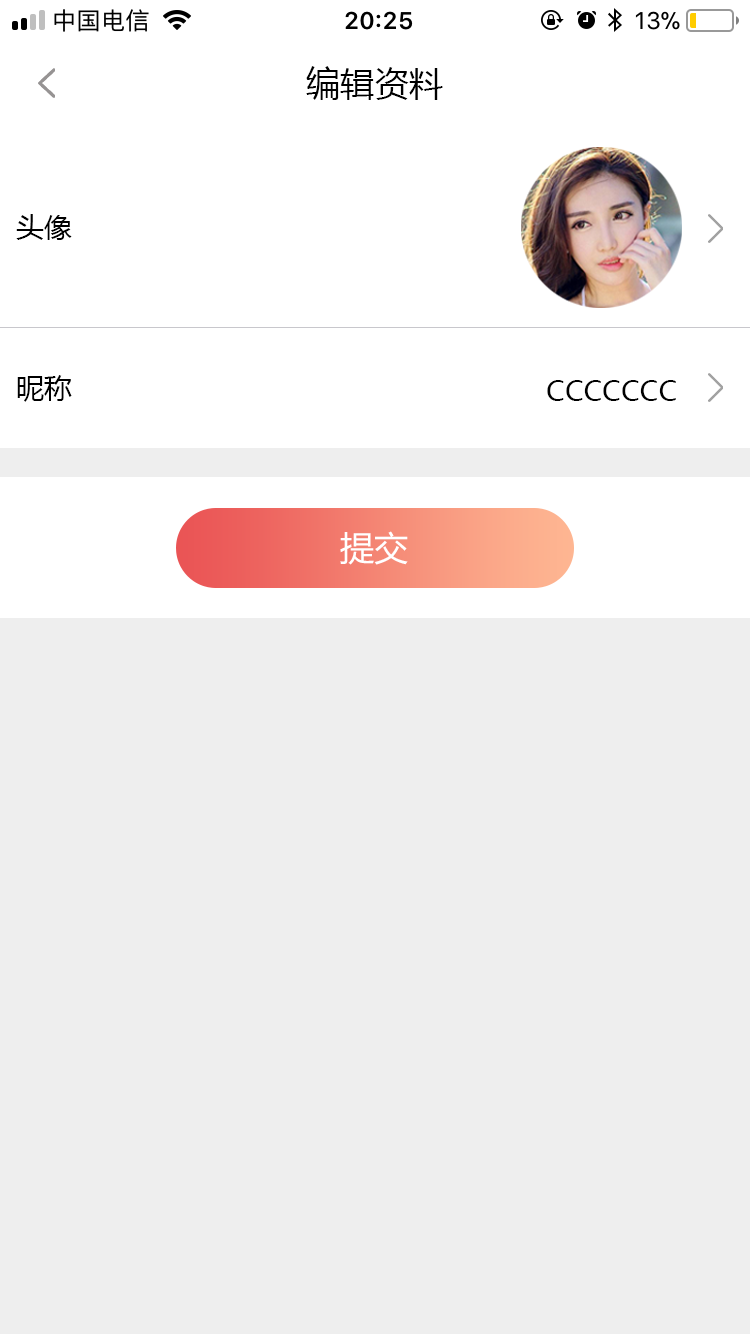
<style>
.page{position:relative;width:750px;height:1334px;background:#eeeeee}
.page>*{position:absolute;margin:0}
.t1{font:34px "MicrosoftYaHei";letter-spacing:0.01em;color:#000000}
.t2{font:28px "MicrosoftYaHei";letter-spacing:0.01em;color:#000000}
.t3{font:28px "MicrosoftYaHei";color:#000000}
.t4{font:34px "MicrosoftYaHei";color:#ffffff}
</style>
<div class="page">
<p class="t1" style="left:306px;top:66px;width:137px;height:34px">编辑资料</p>
<p class="t2" style="left:16px;top:214px;width:56px;height:26px">头像</p>
<p class="t2" style="left:17px;top:375px;width:55px;height:27px">昵称</p>
<p class="t3" style="left:547px;top:380px;width:129px;height:21px">CCCCCCC</p>
<p class="t4" style="left:340px;top:531px;width:68px;height:34px">提交</p>
</div>
